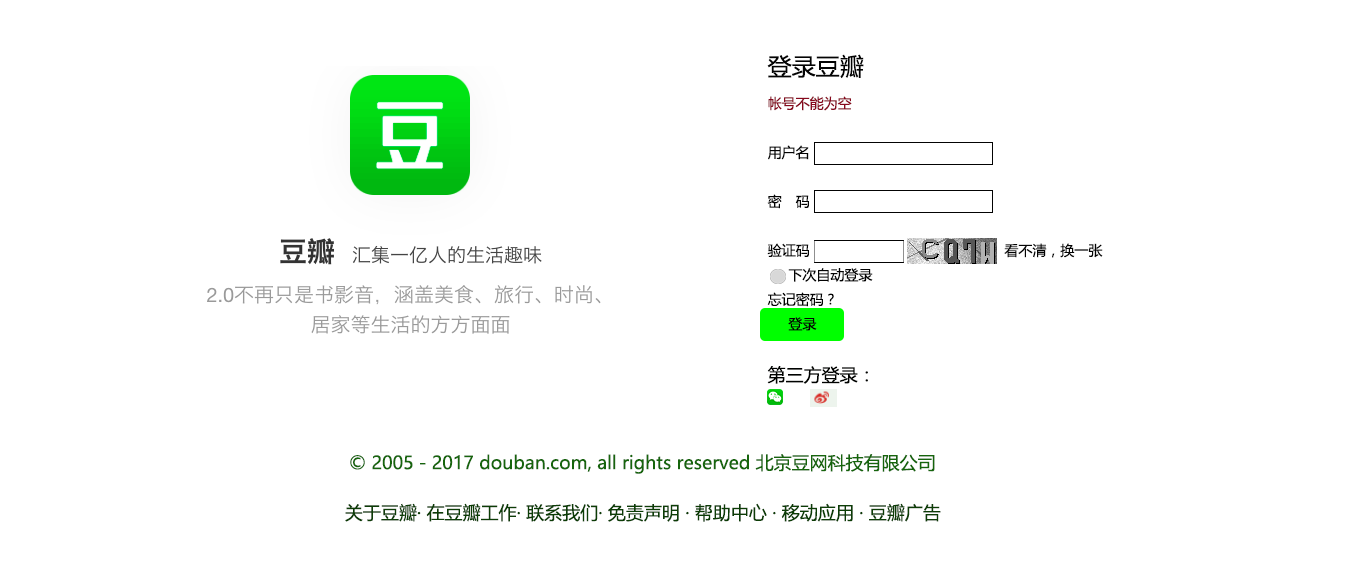
<style>
.page{position:relative;width:1366px;height:580px;background:#ffffff}
.page>*{position:absolute;margin:0}
.t1{font:14px "MicrosoftYaHei";color:#030303}
.t2{font:24px "MicrosoftYaHei";color:#030303}
.t3{font:14px "MicrosoftYaHei";color:#87081d}
.t4{font:18px "MicrosoftYaHei";color:#000200}
.t5{font:18px "MicrosoftYaHei";color:#16650c}
.t6{font:18px "MicrosoftYaHei";color:#0c3d06}
</style>
<div class="page">
<p class="t1" style="left:767px;top:54px;width:336px;height:330px"><span class="t2">登录豆瓣<br></span><span class="t3">帐号不能为空<br></span><br>用户名<br><br>密 码<br><br>验证码                                               看不清，换一张<br>     下次自动登录<br>忘记密码？<br>     登录<br><br><span class="t4">第三方登录：</span></p>
<p class="t5" style="left:350px;top:454px;width:585px;height:20px">© 2005－2017 douban.com, all rights reserved 北京豆网科技有限公司</p>
<p class="t6" style="left:345px;top:503px;width:596px;height:19px">关于豆瓣· 在豆瓣工作· 联系我们· 免责声明 · 帮助中心 · 移动应用 · 豆瓣广告</p>
</div>
